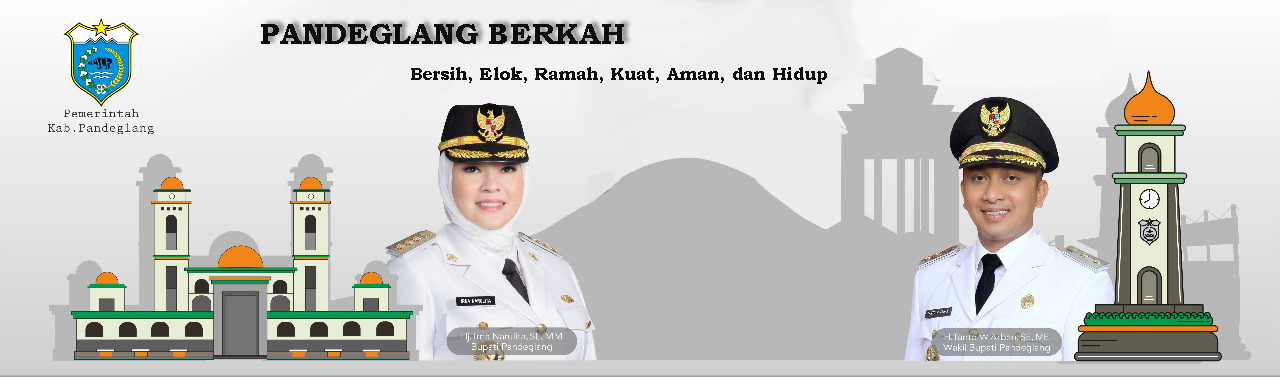
<style>
.page{position:relative;width:1280px;height:377px}
.page>*{position:absolute;margin:0}
.t1{font:30px "BookmanOldStyle-Bold";color:#0e0e0e}
.t2{font:18px "BookmanOldStyle-Bold";color:#0e0e0e}
</style>
<div class="page">
<p class="t1" style="left:261px;top:24px;width:363px;height:20px">PANDEGLANG BERKAH</p>
<p class="t2" style="left:411px;top:67px;width:416px;height:17px">Bersih, Elok, Ramah, Kuat, Aman, dan Hidup</p>
</div>
